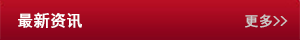
<style>
.page{position:relative;width:300px;height:40px}
.page>*{position:absolute;margin:0}
.t1{font:16px "SimHei";letter-spacing:-0.005em;color:#ffffff;font-weight:bold}
.t2{font:14px "SimHei";letter-spacing:-0.005em;color:#cbc8c8;font-weight:bold}
</style>
<div class="page">
<p class="t1" style="left:18px;top:12px;width:64px;height:16px">最新资讯</p>
<p class="t2" style="left:245px;top:14px;width:43px;height:14px">更多&gt;&gt;</p>
</div>
